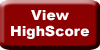
<style>
.page{position:relative;width:100px;height:50px;background:#8b0000}
.page>*{position:absolute;margin:0}
.t1{font:14px "Arial-Black";color:#fffeff}
</style>
<div class="page">
<p class="t1" style="left:11px;top:10px;width:78px;height:29px;text-align:center">View <br>HighScore</p>
</div>
